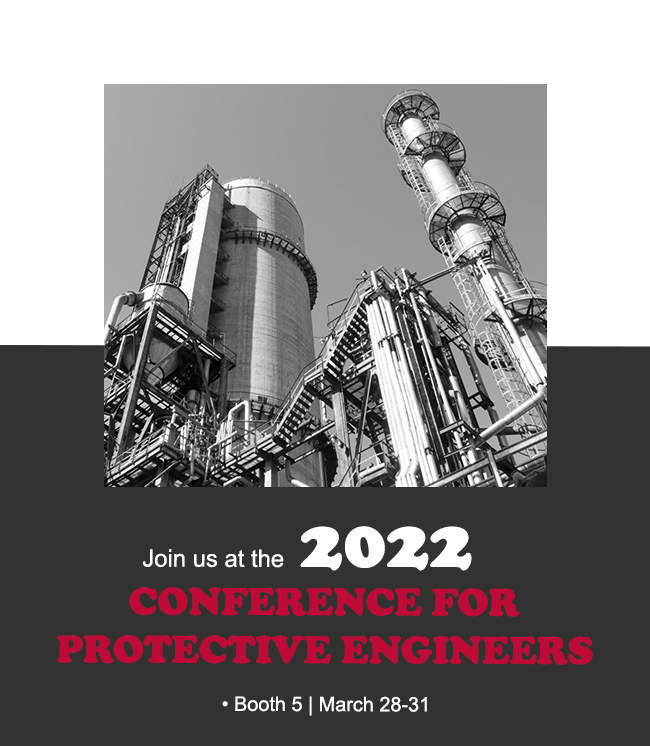
<style>
.page{position:relative;width:650px;height:746px;background:#323232}
.page>*{position:absolute;margin:0}
.t1{font:72px "CooperBlack";color:#ffffff}
.t2{font:40px/48px "CooperBlack";color:#bf0a36;text-transform:uppercase}
.t3{font:24px/48px "ArialMT";color:#fdfdfd}
.t4{font:20px/48px "ArialMT";color:#fdfdfd}
</style>
<div class="page">
<p class="t1" style="left:300px;top:526px;width:172px;height:45px">2022</p>
<p class="t2" style="left:56px;top:549px;width:537px;height:167px;text-align:center"><span class="t3">Join us at the                                   <br></span>Conference for <br>Protective Engineers <br><span class="t4">• Booth 5 | March 28-31</span></p>
</div>
